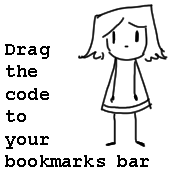
<style>
.page{position:relative;width:184px;height:174px;background:#ffffff}
.page>*{position:absolute;margin:0}
.t1{font:18.7px "CourierNewPS-BoldMT";color:#000000}
</style>
<div class="page">
<p class="t1" style="left:5px;top:44px;width:144px;height:123px">Drag<br>the<br>code<br>to<br>your<br>bookmarks bar</p>
</div>
